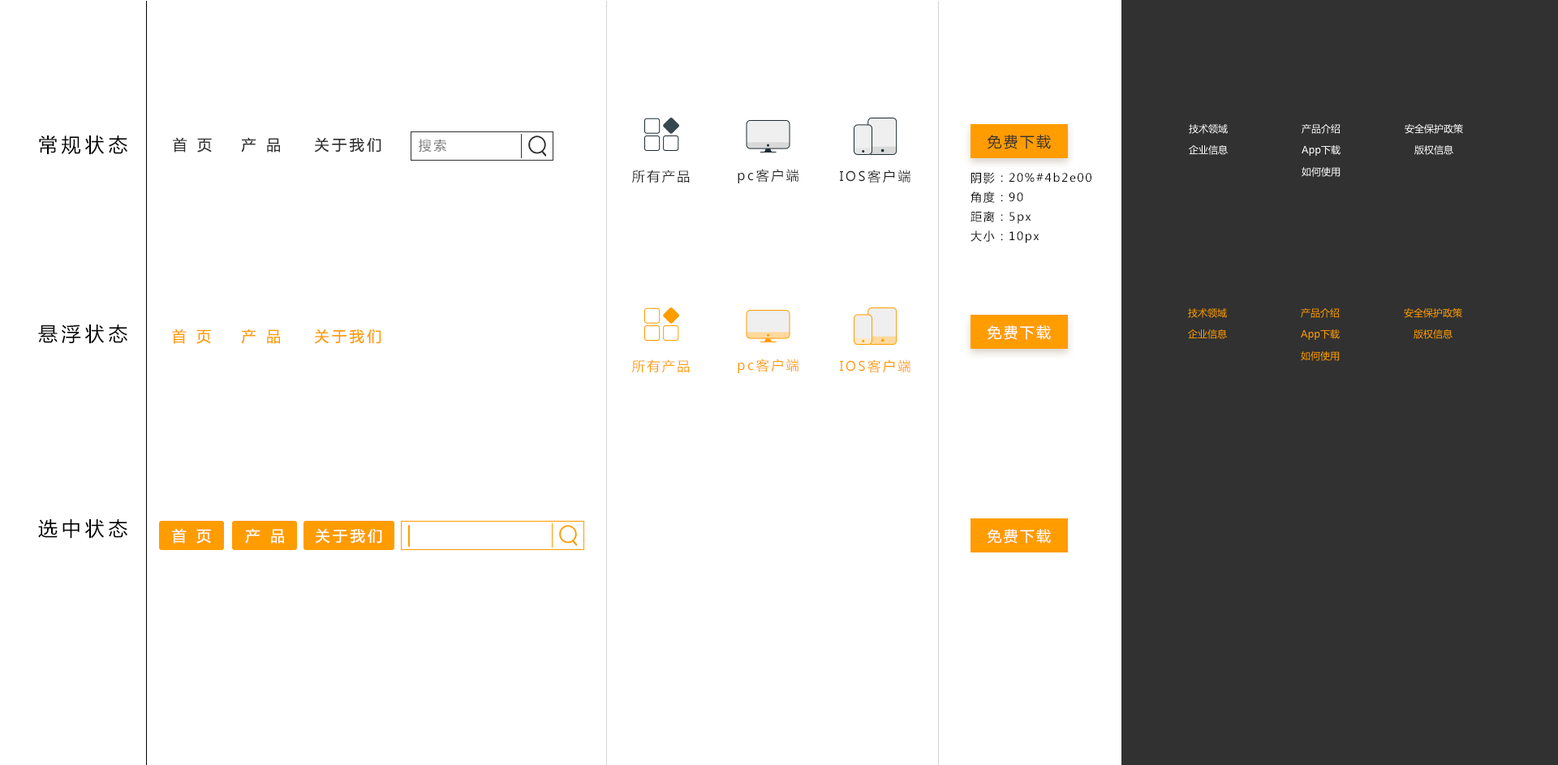
<style>
.page{position:relative;width:1558px;height:765px;background:#ffffff}
.page>*{position:absolute;margin:0}
.t1{font:9.7px "MicrosoftYaHei";color:#ffffff}
.t2{font:19.5px "MicrosoftYaHei";letter-spacing:0.2em;color:#000000}
.t3{font:14.6px "MicrosoftYaHei";letter-spacing:0.2em;color:#313131}
.t4{font:14.6px "MicrosoftYaHei";letter-spacing:0.12em;color:#313131}
.t5{font:13px "MicrosoftYaHei";letter-spacing:0.16em;color:#797979}
.t6{font:13px "MicrosoftYaHei";letter-spacing:0.16em;color:#262626}
.t7{font:11.4px/19.5px "MicrosoftYaHei";letter-spacing:0.12em;color:#000000}
.t8{font:9.7px "MicrosoftYaHei";color:#ff9c00}
.t9{font:14.6px "MicrosoftYaHei";letter-spacing:0.2em;color:#ff9c00}
.t10{font:14.6px "MicrosoftYaHei";letter-spacing:0.12em;color:#ffffff}
.t11{font:13px "MicrosoftYaHei";letter-spacing:0.16em;color:#ff9c00}
.t12{font:14.6px "MicrosoftYaHei";letter-spacing:0.2em;color:#ffffff}
</style>
<div class="page">
<p class="t1" style="left:1189px;top:124px;width:39px;height:10px">技术领域</p>
<p class="t1" style="left:1302px;top:124px;width:39px;height:10px">产品介绍</p>
<p class="t1" style="left:1405px;top:124px;width:58px;height:10px">安全保护政策</p>
<p class="t2" style="left:39px;top:136px;width:88px;height:19px">常规状态</p>
<p class="t3" style="left:173px;top:137px;width:39px;height:16px">首 页</p>
<p class="t3" style="left:241px;top:137px;width:39px;height:16px">产 品</p>
<p class="t3" style="left:314px;top:137px;width:67px;height:16px">关于我们</p>
<p class="t4" style="left:987px;top:135px;width:64px;height:14px">免费下载</p>
<p class="t5" style="left:419px;top:139px;width:27px;height:14px">搜索</p>
<p class="t1" style="left:1189px;top:145px;width:39px;height:10px">企业信息</p>
<p class="t1" style="left:1302px;top:145px;width:39px;height:11px">App下载</p>
<p class="t1" style="left:1415px;top:145px;width:38px;height:10px">版权信息</p>
<p class="t6" style="left:632px;top:170px;width:58px;height:13px">所有产品</p>
<p class="t6" style="left:738px;top:169px;width:61px;height:14px">pc客户端</p>
<p class="t6" style="left:840px;top:170px;width:71px;height:13px">IOS客户端</p>
<p class="t7" style="left:971px;top:172px;width:121px;height:71px">阴影：20%#4b2e00<br>角度：90<br>距离：5px<br>大小：10px</p>
<p class="t1" style="left:1302px;top:167px;width:39px;height:10px">如何使用</p>
<p class="t8" style="left:1188px;top:308px;width:39px;height:10px">技术领域</p>
<p class="t8" style="left:1301px;top:308px;width:39px;height:10px">产品介绍</p>
<p class="t8" style="left:1404px;top:308px;width:58px;height:10px">安全保护政策</p>
<p class="t2" style="left:38px;top:325px;width:89px;height:19px">悬浮状态</p>
<p class="t9" style="left:172px;top:329px;width:39px;height:15px">首 页</p>
<p class="t9" style="left:241px;top:329px;width:39px;height:15px">产 品</p>
<p class="t9" style="left:314px;top:329px;width:67px;height:15px">关于我们</p>
<p class="t10" style="left:987px;top:325px;width:64px;height:15px">免费下载</p>
<p class="t8" style="left:1188px;top:329px;width:39px;height:10px">企业信息</p>
<p class="t8" style="left:1301px;top:329px;width:39px;height:11px">App下载</p>
<p class="t8" style="left:1414px;top:329px;width:39px;height:10px">版权信息</p>
<p class="t8" style="left:1301px;top:351px;width:39px;height:10px">如何使用</p>
<p class="t11" style="left:632px;top:360px;width:58px;height:13px">所有产品</p>
<p class="t11" style="left:738px;top:359px;width:61px;height:14px">pc客户端</p>
<p class="t11" style="left:840px;top:360px;width:71px;height:13px">IOS客户端</p>
<p class="t2" style="left:38px;top:519px;width:89px;height:20px">选中状态</p>
<p class="t12" style="left:172px;top:528px;width:39px;height:16px">首 页</p>
<p class="t12" style="left:245px;top:528px;width:39px;height:16px">产 品</p>
<p class="t12" style="left:315px;top:528px;width:67px;height:16px">关于我们</p>
<p class="t10" style="left:987px;top:529px;width:64px;height:15px">免费下载</p>
</div>
